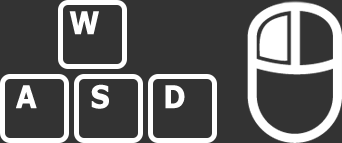
<style>
.page{position:relative;width:342px;height:143px;background:#333333}
.page>*{position:absolute;margin:0}
.t1{font:30.9px "Verdana-Bold";letter-spacing:-0.06em;color:#ffffff;font-weight:bold;scale:0.86 1}
</style>
<div class="page">
<p class="t1" style="left:69px;top:11px;width:30px;height:24px">W</p>
<p class="t1" style="left:16px;top:85px;width:21px;height:24px">A</p>
<p class="t1" style="left:91px;top:84px;width:18px;height:25px">S</p>
<p class="t1" style="left:165px;top:85px;width:20px;height:24px">D</p>
</div>
